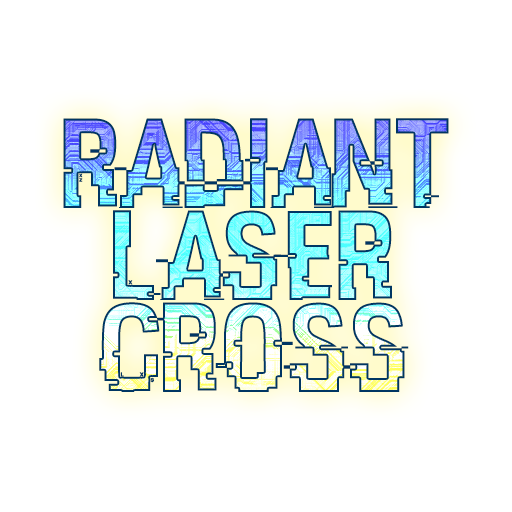
<style>
.page{position:relative;width:512px;height:512px;background:#ffffff}
.page>*{position:absolute;margin:0}
.t1{font:128px/92px "HACKED"}
</style>
<div class="page">
<p class="t1" style="left:63px;top:118px;width:386px;height:274px;text-align:center">Radiant<br>Laser<br>Cross</p>
</div>
